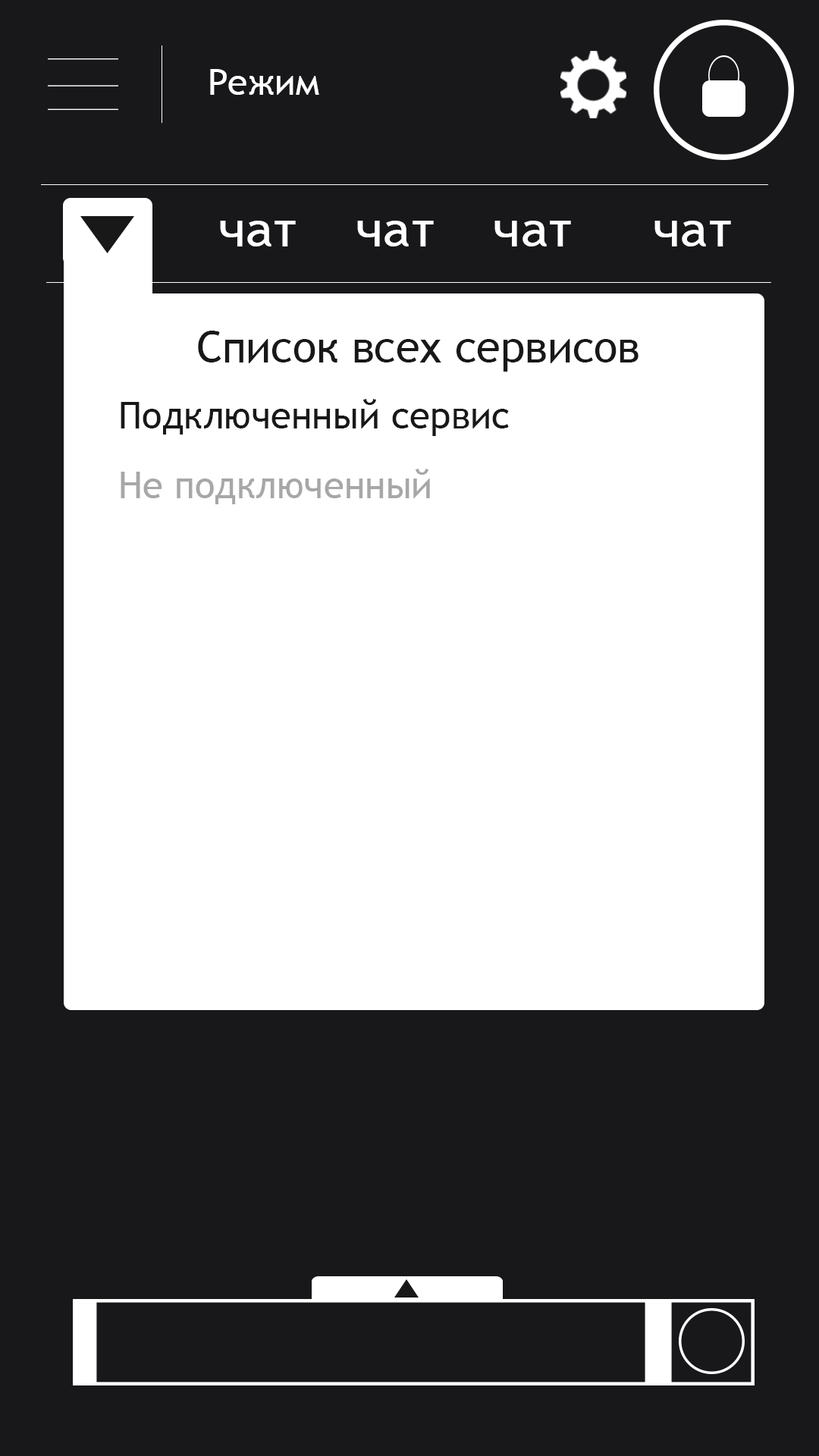
<style>
.page{position:relative;width:819px;height:1456px;background:#18181a}
.page>*{position:absolute;margin:0}
.t1{font:36.4px "TrebuchetMS";color:#ffffff}
.t2{font:49.3px "TrebuchetMS";color:#ffffff;scale:1.08 1}
.t3{font:43.6px "TrebuchetMS";color:#181819}
.t4{font:37.4px "TrebuchetMS";color:#181819}
.t5{font:37.4px "TrebuchetMS";color:#a7a7a7}
</style>
<div class="page">
<p class="t1" style="left:210px;top:69px;width:109px;height:26px">Режим</p>
<p class="t2" style="left:220px;top:221px;width:76px;height:25px">чат</p>
<p class="t2" style="left:357px;top:221px;width:77px;height:25px">чат</p>
<p class="t2" style="left:494px;top:221px;width:77px;height:25px">чат</p>
<p class="t2" style="left:654px;top:221px;width:77px;height:25px">чат</p>
<p class="t3" style="left:198px;top:331px;width:441px;height:41px">Список всех сервисов</p>
<p class="t4" style="left:121px;top:399px;width:388px;height:37px">Подключенный сервис</p>
<p class="t5" style="left:121px;top:469px;width:309px;height:35px">Не подключенный</p>
</div>
